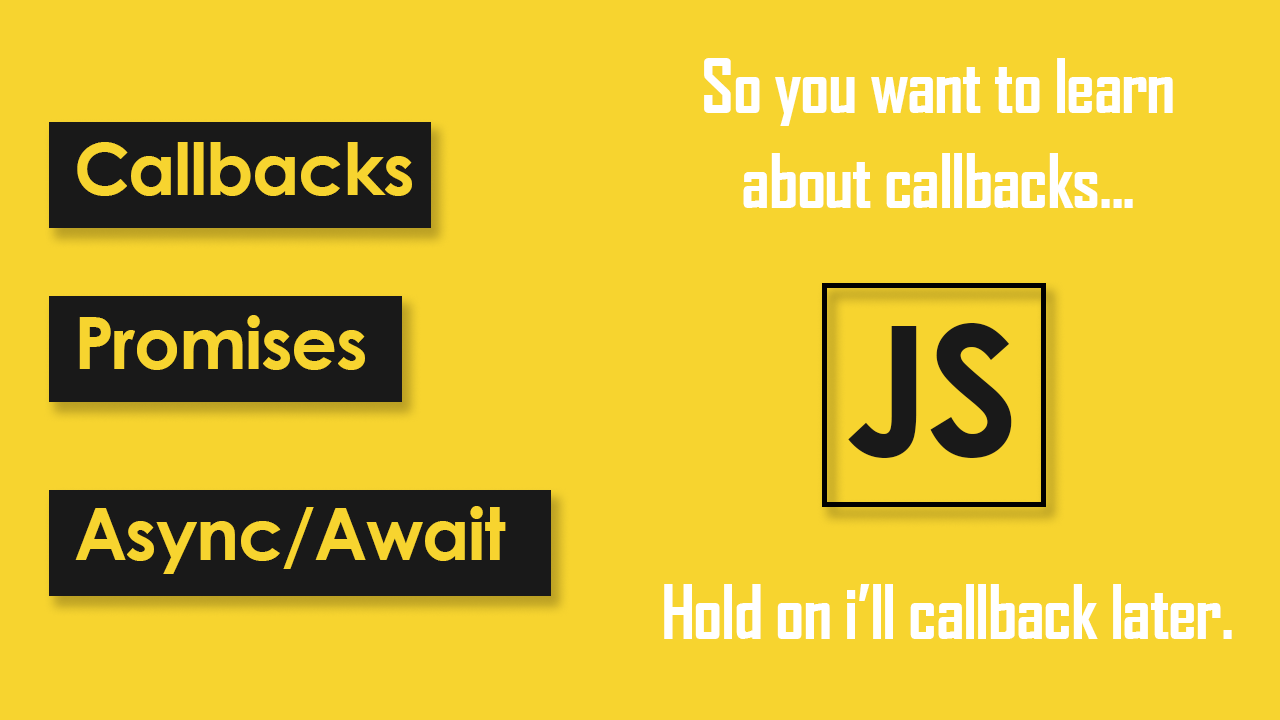
<style>
.page{position:relative;width:1280px;height:720px;background:#f7d42f}
.page>*{position:absolute;margin:0}
.t1{font:72px/19px "AgencyFB-Bold";letter-spacing:-0.02em;color:#ffffff}
.t2{font:72px "CenturyGothic-Bold";letter-spacing:-0.02em;color:#f7d42f}
.t3{font:178.5px "CenturyGothic-Bold";letter-spacing:-0.02em;color:#191919}
.t4{font:72px "AgencyFB-Bold";letter-spacing:-0.02em;color:#ffffff}
</style>
<div class="page">
<p class="t1" style="left:704px;top:58px;width:469px;height:150px;text-align:center">So you want to learn <br><br><br><br><br>about callbacks...</p>
<p class="t2" style="left:77px;top:142px;width:335px;height:54px">Callbacks</p>
<p class="t2" style="left:79px;top:315px;width:286px;height:55px">Promises</p>
<p class="t3" style="left:848px;top:323px;width:164px;height:135px">JS</p>
<p class="t2" style="left:75px;top:506px;width:431px;height:68px">Async/Await</p>
<p class="t4" style="left:664px;top:584px;width:568px;height:55px">Hold on i’ll callback later.</p>
</div>
